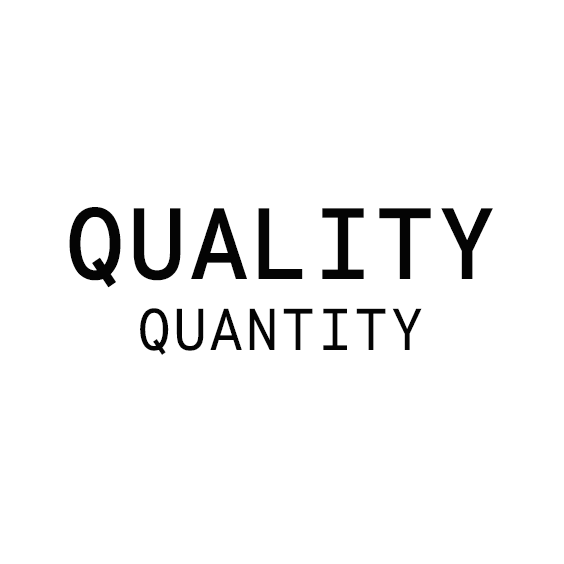
<style>
.page{position:relative;width:564px;height:564px;background:#ffffff}
.page>*{position:absolute;margin:0}
.t1{font:101px "OverpassMono-SemiBold";color:#040404}
.t2{font:58.6px "OverpassMono-Regular";color:#040404}
</style>
<div class="page">
<p class="t1" style="left:69px;top:207px;width:424px;height:81px">QUALITY</p>
<p class="t2" style="left:140px;top:308px;width:282px;height:47px">QUANTITY</p>
</div>
